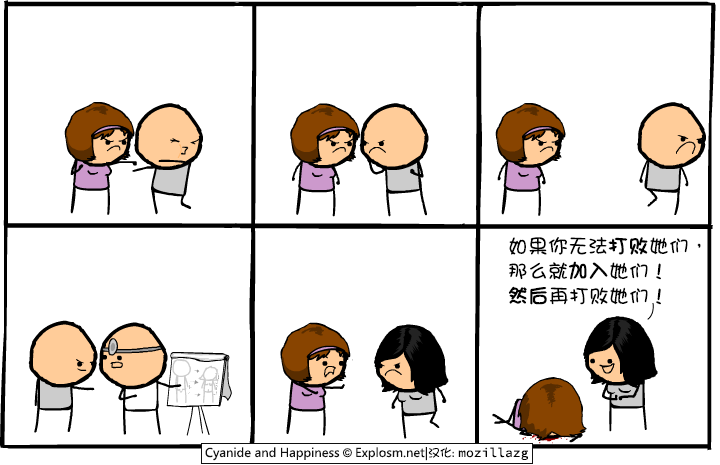
<style>
.page{position:relative;width:720px;height:465px;background:#ffffff}
.page>*{position:absolute;margin:0}
.t1{font:20px/25px "DFGirl";color:#000000}
.t2{font:20px/25px "DFGirl";color:#000000;font-weight:bold}
</style>
<div class="page">
<p class="t1" style="left:508px;top:237px;width:193px;height:68px">如果你无法<span class="t2">打败</span>她们，<br>那么就<span class="t2">加入</span>她们！<br><span class="t2">然后</span>再打败她们！</p>
</div>
